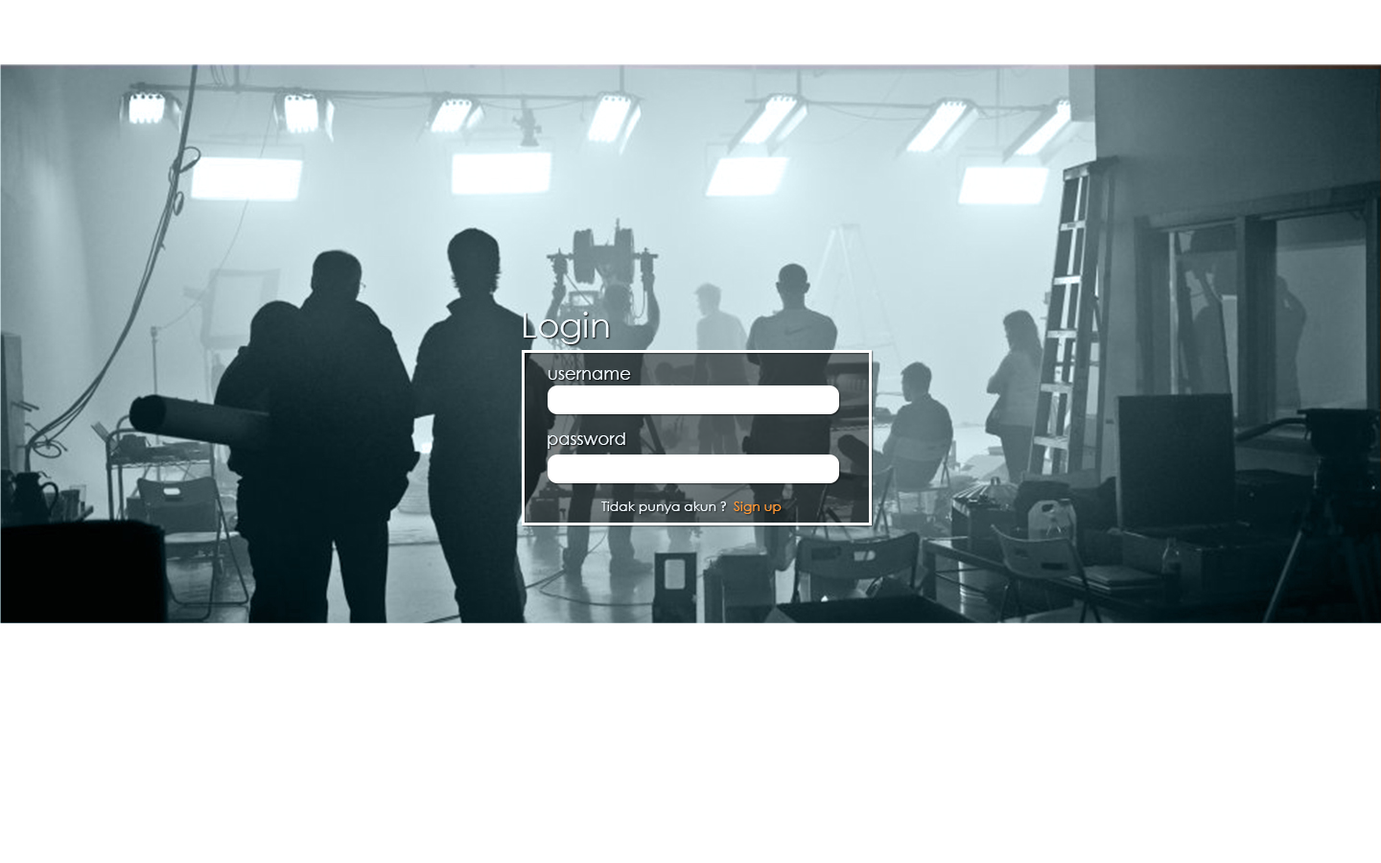
<style>
.page{position:relative;width:1381px;height:863px;background:#ffffff}
.page>*{position:absolute;margin:0}
.t1{font:34.5px "CenturyGothic";color:#f0f9ff}
.t2{font:17.3px "CenturyGothic";color:#f0f9ff}
.t3{font:13.4px "CenturyGothic";color:#f0f9ff}
.t4{font:13.4px "Calibri";color:#f0f9ff}
.t5{font:13.4px "CenturyGothic";color:#ff9933}
</style>
<div class="page">
<p class="t1" style="left:524px;top:312px;width:85px;height:32px">Login</p>
<p class="t2" style="left:549px;top:370px;width:82px;height:10px">username</p>
<p class="t2" style="left:548px;top:433px;width:77px;height:16px">password</p>
<p class="t3" style="left:601px;top:502px;width:181px;height:12px">Tidak punya akun <span class="t4">?  </span><span class="t5">Sign up</span></p>
</div>
